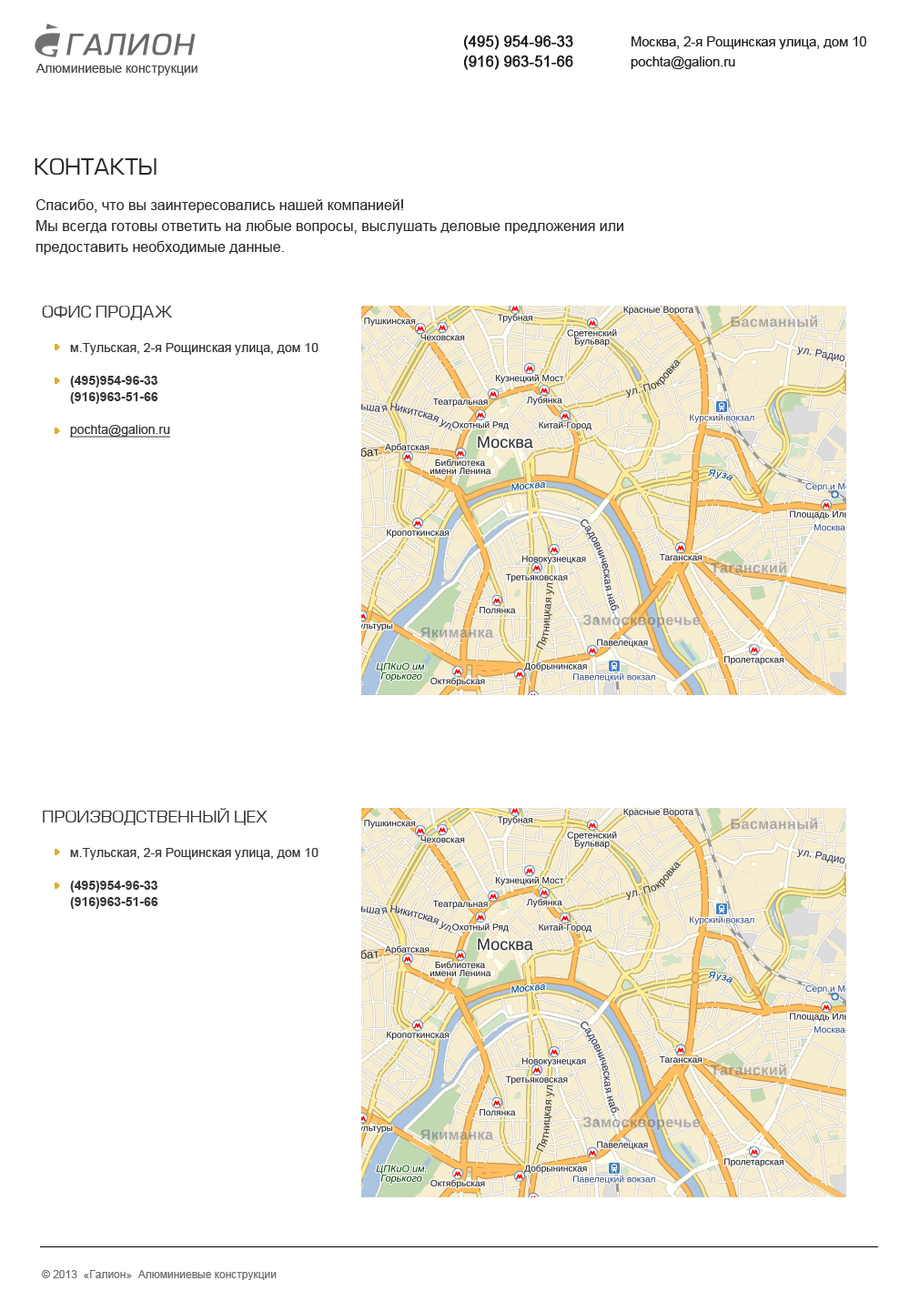
<style>
.page{position:relative;width:910px;height:1311px;background:#ffffff}
.page>*{position:absolute;margin:0}
.t1{font:27.3px "Europe-Italic";letter-spacing:0.06em;color:#696969;font-weight:bold}
.t2{font:14.6px/20px "ArialMT";color:#191919;font-weight:bold}
.t3{font:13.3px/20px "ArialMT";color:#212020}
.t4{font:12.7px "ArialMT";color:#4b4b4b}
.t5{font:21.8px "EuropeNormal";color:#292929;text-transform:uppercase}
.t6{font:14.6px/20.6px "ArialMT";color:#2d2d2d}
.t7{font:16.4px "EuropeNormal";color:#373737;text-transform:uppercase}
.t8{font:12.7px/16.4px "ArialMT";color:#373737}
.t9{font:12.7px/16.4px "Arial-BoldMT";color:#373737}
.t10{font:12.7px/16.4px "ArialMT";color:#373737;text-decoration:underline}
.t11{font:10.9px "ArialMT";color:#6d6d6d}
</style>
<div class="page">
<p class="t1" style="left:66px;top:34px;width:130px;height:21px">ГАЛИОН</p>
<p class="t2" style="left:463px;top:35px;width:110px;height:35px">(495) 954-96-33<br>(916) 963-51-66</p>
<p class="t3" style="left:630px;top:36px;width:236px;height:33px">Москва, 2-я Рощинская улица, дом 10<br>pochta@galion.ru</p>
<p class="t4" style="left:35px;top:64px;width:162px;height:12px">Алюминиевые конструкции</p>
<p class="t5" style="left:35px;top:158px;width:121px;height:17px">Контакты</p>
<p class="t6" style="left:35px;top:199px;width:588px;height:56px">Спасибо, что вы заинтересовались нашей компанией! <br>Мы всегда готовы ответить на любые вопросы, выслушать деловые предложения или предоставить необходимые данные.</p>
<p class="t7" style="left:42px;top:306px;width:131px;height:14px">Офис продаж</p>
<p class="t8" style="left:70px;top:343px;width:248px;height:95px">м.Тульская, 2-я Рощинская улица, дом 10<br><br><span class="t9">(495)954-96-33<br>(916)963-51-66<br><br></span><span class="t10">pochta@galion.ru</span></p>
<p class="t7" style="left:43px;top:808px;width:224px;height:17px">Производственный цех</p>
<p class="t8" style="left:70px;top:848px;width:248px;height:61px">м.Тульская, 2-я Рощинская улица, дом 10<br><br><span class="t9">(495)954-96-33<br>(916)963-51-66</span></p>
<p class="t11" style="left:41px;top:1270px;width:236px;height:10px">© 2013  «Галион»  Алюминиевые конструкции</p>
</div>
